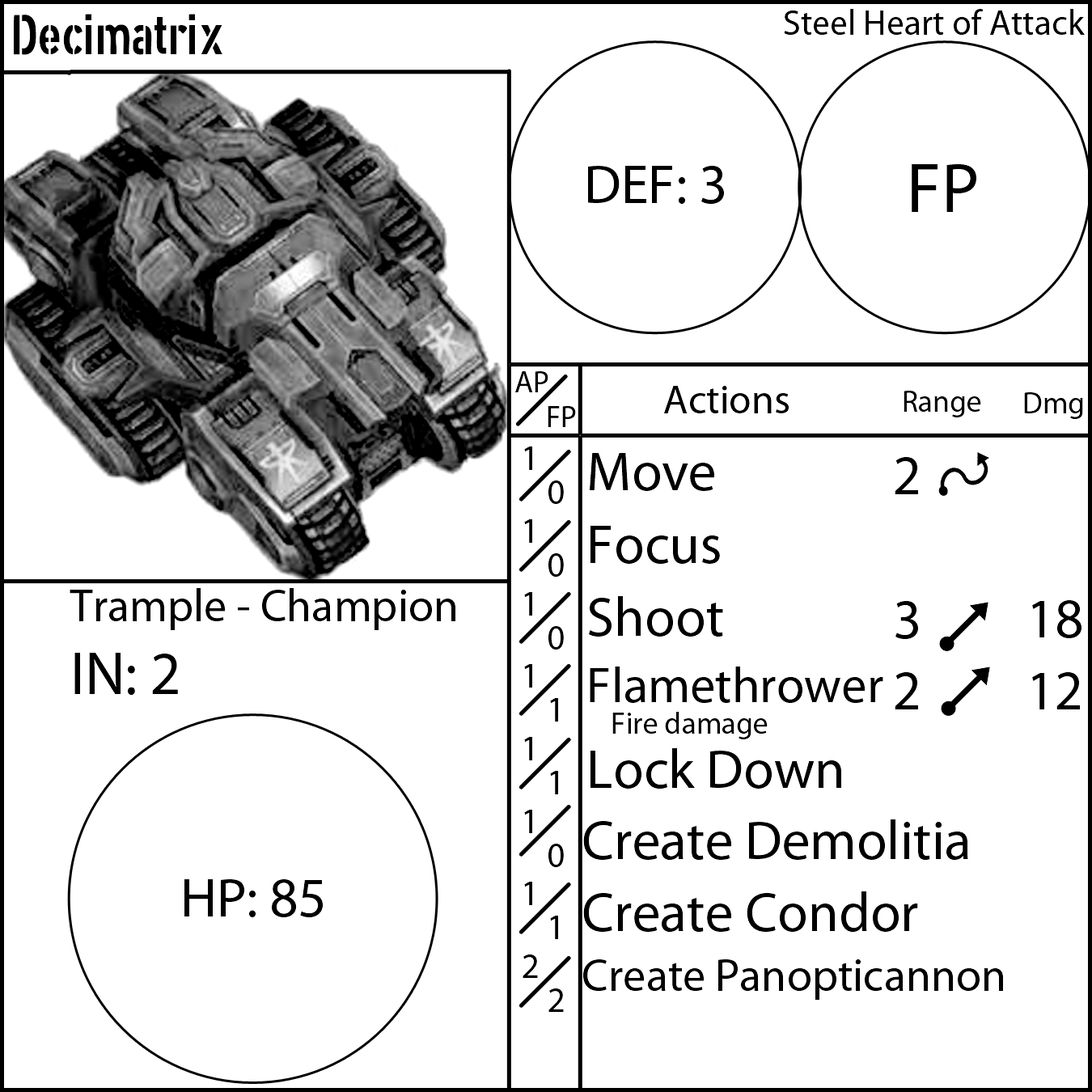
<style>
.page{position:relative;width:1092px;height:1092px;background:#ffffff}
.page>*{position:absolute;margin:0}
.t1{font:55.6px "XXIISTRAIGHT-ARMY";color:#000000}
.t2{font:35.4px "MyriadPro-Regular";color:#000000}
.t3{font:55.6px "MyriadPro-Regular";color:#000000}
.t4{font:70.8px "MyriadPro-Regular";color:#000000}
.t5{font:30.3px "MyriadPro-Regular";color:#000000}
.t6{font:40.4px "MyriadPro-Regular";color:#000000}
.t7{font:50.6px "MyriadPro-Regular";color:#000000}
.t8{font:45.5px "MyriadPro-Regular";color:#000000}
.t9{font:60.7px "MyriadPro-Regular";color:#000000}
</style>
<div class="page">
<p class="t1" style="left:14px;top:14px;width:208px;height:41px">Decimatrix</p>
<p class="t2" style="left:784px;top:9px;width:301px;height:26px">Steel Heart of Attack</p>
<p class="t3" style="left:588px;top:166px;width:136px;height:38px">DEF: 3</p>
<p class="t4" style="left:912px;top:164px;width:64px;height:48px">FP</p>
<p class="t5" style="left:515px;top:371px;width:33px;height:21px">AP</p>
<p class="t6" style="left:664px;top:386px;width:125px;height:27px">Actions</p>
<p class="t5" style="left:904px;top:391px;width:77px;height:26px">Range</p>
<p class="t5" style="left:1024px;top:392px;width:59px;height:27px">Dmg</p>
<p class="t5" style="left:548px;top:406px;width:28px;height:21px">FP</p>
<p class="t2" style="left:523px;top:447px;width:15px;height:531px">1<br>1<br>1<br>1<br>1<br>1<br>1<br>2</p>
<p class="t3" style="left:583px;top:453px;width:420px;height:547px">Move<br>Focus<br>Shoot<br><span class="t7">Flamethrower<br></span><span class="t5"> Fire damage<br></span>Lock Down<br>Create Demolitia<br>Create Condor<br><span class="t8">Create Panopticannon</span></p>
<p class="t3" style="left:895px;top:457px;width:23px;height:252px;text-align:center">2<br><br>3<br>2</p>
<p class="t2" style="left:548px;top:480px;width:16px;height:532px">0<br>0<br>0<br>1<br>1<br>0<br>1<br>2</p>
<p class="t8" style="left:70px;top:588px;width:385px;height:107px">Trample - Champion<br><span class="t9">IN: 2</span></p>
<p class="t3" style="left:1032px;top:600px;width:49px;height:109px;text-align:center">18<br>12</p>
<p class="t3" style="left:184px;top:879px;width:139px;height:38px">HP: 85</p>
</div>
